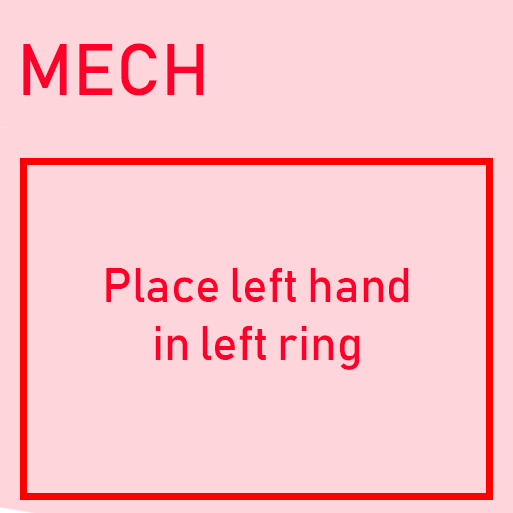
<style>
.page{position:relative;width:513px;height:513px;background:#ffd5dc}
.page>*{position:absolute;margin:0}
.t1{font:72px "Bahnschrift";color:#ff002a}
.t2{font:48px "Bahnschrift";color:#ff002a}
</style>
<div class="page">
<p class="t1" style="left:23px;top:43px;width:181px;height:53px">MECH</p>
<p class="t2" style="left:106px;top:268px;width:303px;height:102px;text-align:center">Place left hand<br>in left ring</p>
</div>
